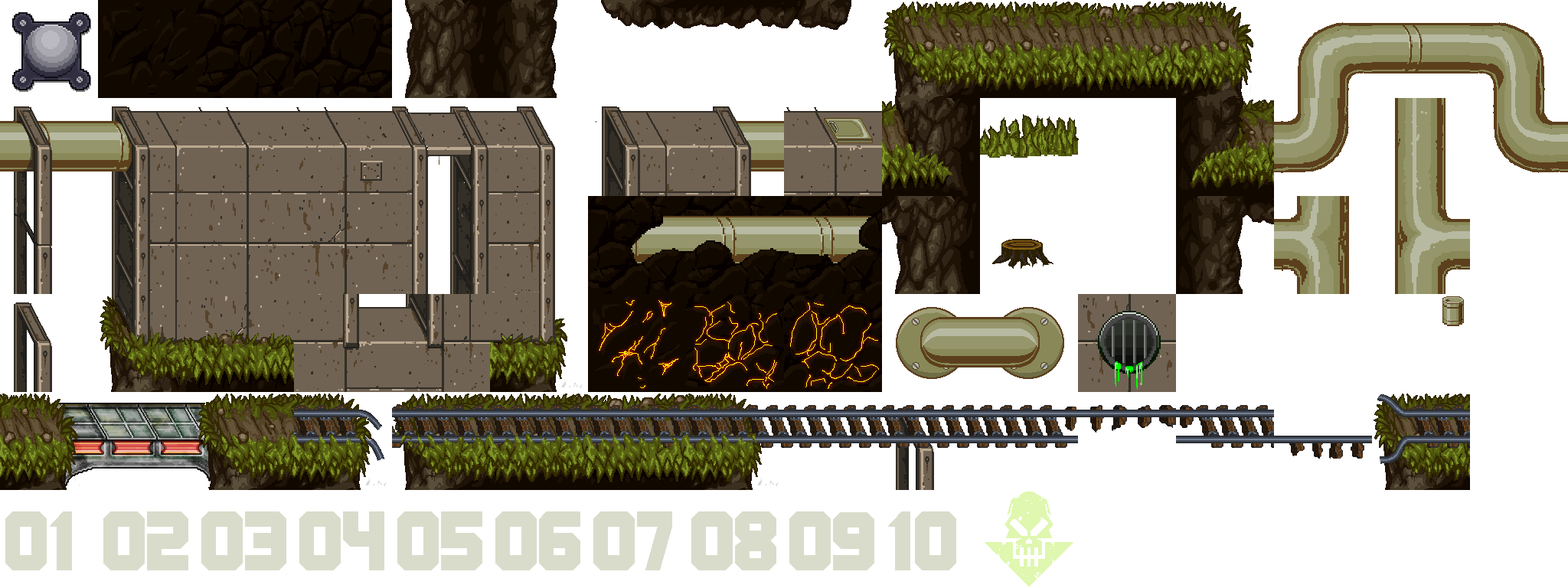
<style>
.page{position:relative;width:1568px;height:588px;background:#ffffff}
.page>*{position:absolute;margin:0}
.t1{font:82px "BNMachine";color:#d1d3be}
</style>
<div class="page">
<p class="t1" style="left:5px;top:511px;width:67px;height:59px;opacity:0.8">01</p>
<p class="t1" style="left:103px;top:511px;width:85px;height:59px;opacity:0.8">02</p>
<p class="t1" style="left:201px;top:511px;width:85px;height:59px;opacity:0.8">03</p>
<p class="t1" style="left:299px;top:511px;width:85px;height:59px;opacity:0.8">04</p>
<p class="t1" style="left:397px;top:511px;width:85px;height:59px;opacity:0.8">05</p>
<p class="t1" style="left:495px;top:511px;width:85px;height:59px;opacity:0.8">06</p>
<p class="t1" style="left:593px;top:511px;width:79px;height:59px;opacity:0.8">07</p>
<p class="t1" style="left:691px;top:511px;width:85px;height:59px;opacity:0.8">08</p>
<p class="t1" style="left:789px;top:511px;width:85px;height:59px;opacity:0.8">09</p>
<p class="t1" style="left:888px;top:511px;width:68px;height:59px;opacity:0.8">10</p>
</div>
